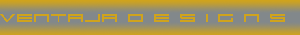
<style>
.page{position:relative;width:300px;height:35px}
.page>*{position:absolute;margin:0}
.t1{font:17px "911Porscha";color:#cfa31d}
</style>
<div class="page">
<p class="t1" style="left:0px;top:14px;width:285px;height:8px">Ventaja D e s i g n s</p>
</div>
